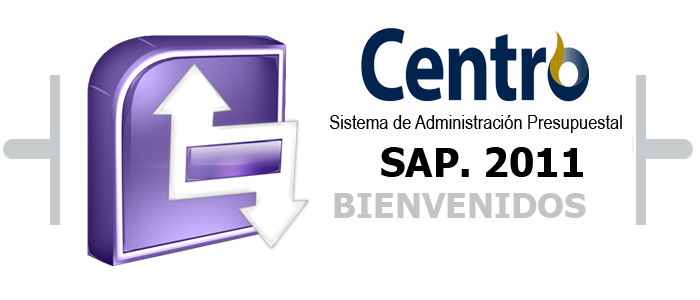
<style>
.page{position:relative;width:700px;height:300px;background:#ffffff}
.page>*{position:absolute;margin:0}
.t1{font:20px "ArialNarrow";color:#000000}
.t2{font:40px "Tahoma-Bold";color:#000000}
.t3{font:35px "Tahoma-Bold";color:#c4c4c4}
</style>
<div class="page">
<p class="t1" style="left:330px;top:115px;width:292px;height:62px">Sistema de Administración Presupuestal<br><span class="t2">SAP. 2011</span></p>
<p class="t3" style="left:334px;top:193px;width:252px;height:25px">BIENVENIDOS</p>
</div>
